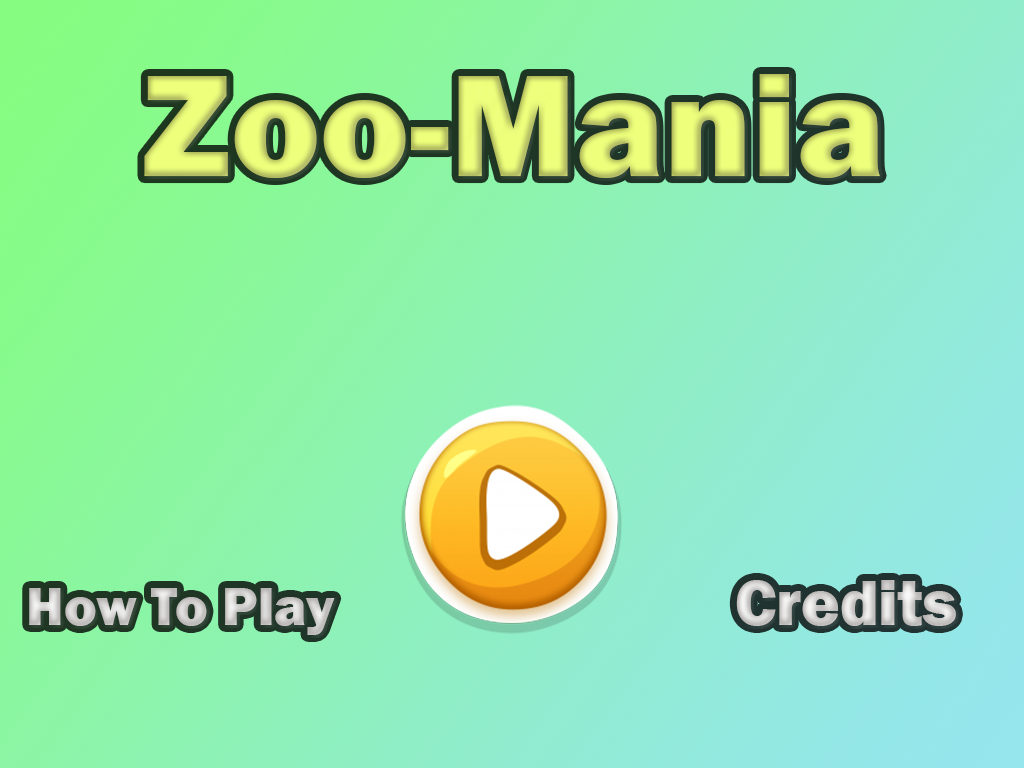
<style>
.page{position:relative;width:1024px;height:768px}
.page>*{position:absolute;margin:0}
.t1{font:65.8px "FranklinGothic-Heavy";color:#cfcdcc}
.t2{font:55.5px "FranklinGothic-Heavy";color:#cbc9c8}
</style>
<div class="page">
<p class="t1" style="left:736px;top:580px;width:220px;height:46px">Credits</p>
<p class="t2" style="left:29px;top:588px;width:306px;height:47px">How To Play</p>
</div>
